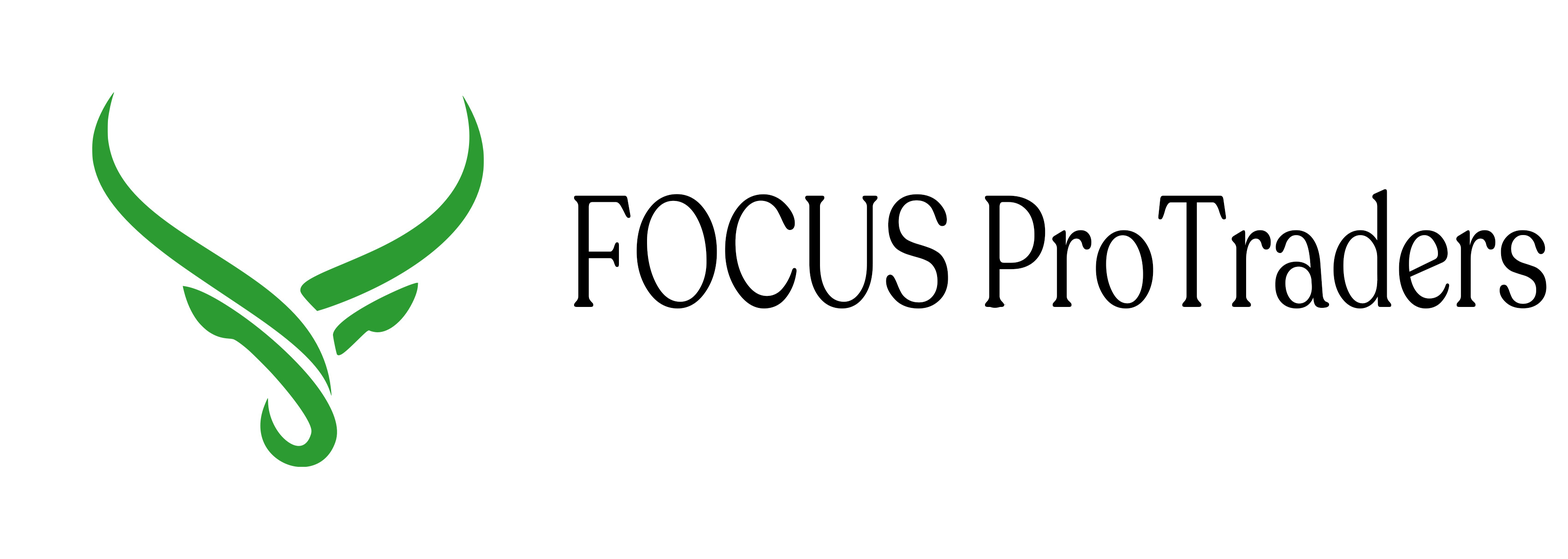
<style>
.page{position:relative;width:1568px;height:559px;background:#ffffff}
.page>*{position:absolute;margin:0}
.t1{font:156.8px "Recoleta-Regular";color:#000000;scale:0.74 1}
</style>
<div class="page">
<p class="t1" style="left:574px;top:189px;width:972px;height:120px">FOCUS ProTraders</p>
</div>
